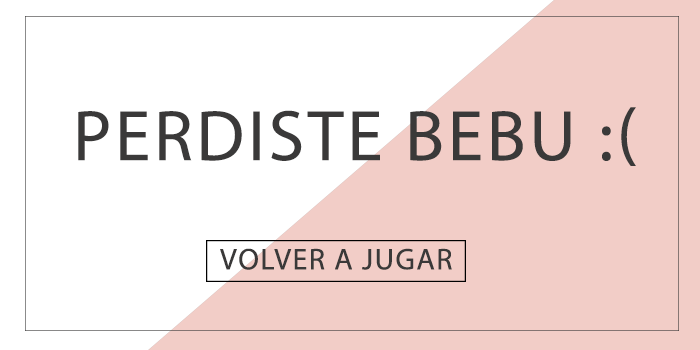
<style>
.page{position:relative;width:700px;height:350px;background:#ffffff}
.page>*{position:absolute;margin:0}
.t1{font:72px "MyriadPro-Regular";letter-spacing:0.05em;color:#3a3939;text-transform:uppercase}
.t2{font:30px "MyriadPro-Regular";letter-spacing:0.05em;color:#3a3939;text-transform:uppercase}
</style>
<div class="page">
<p class="t1" style="left:78px;top:107px;width:558px;height:59px">PErdiste bebu :(</p>
<p class="t2" style="left:220px;top:248px;width:232px;height:22px">Volver a jugar</p>
</div>
